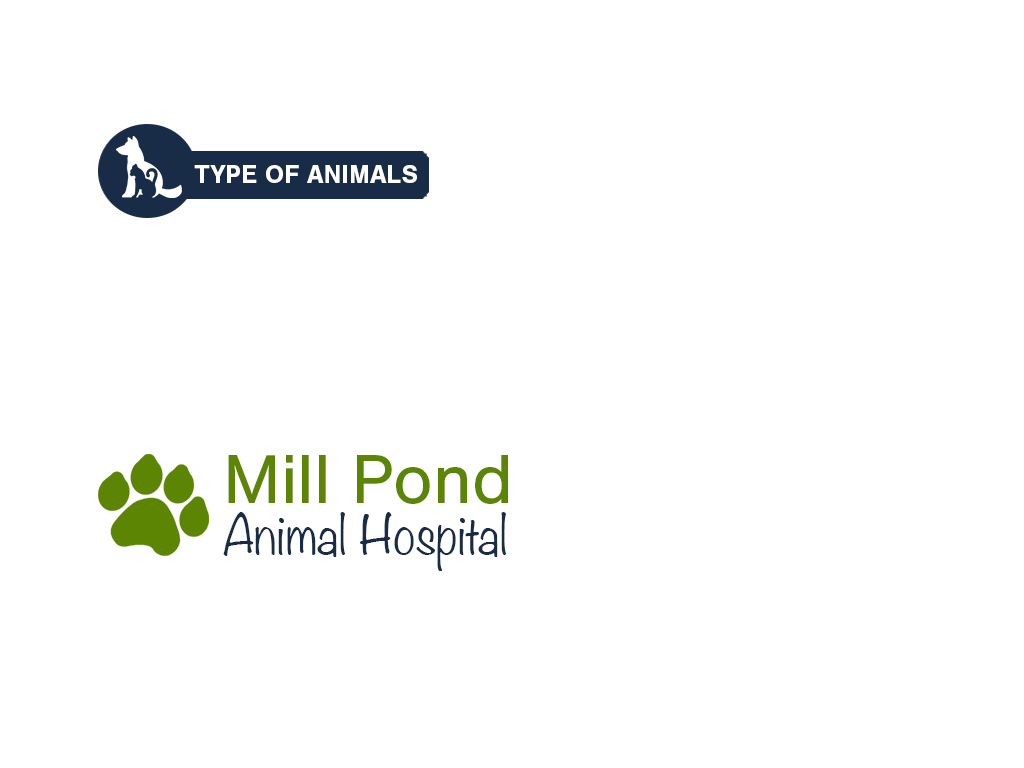
<style>
.page{position:relative;width:1024px;height:768px;background:#ffffff}
.page>*{position:absolute;margin:0}
.t1{font:26px "NimbusSan-Bol";color:#ffffff;text-transform:uppercase}
.t2{font:48.6px/51.4px "Noteworthy-Light";color:#182c47}
.t3{font:72.4px/51.4px "NimbusSan-Reg";color:#5b8503}
</style>
<div class="page">
<p class="t1" style="left:194px;top:165px;width:223px;height:18px">Type of animals</p>
<p class="t2" style="left:223px;top:455px;width:285px;height:116px"><span class="t3">Mill Pond <br></span>Animal Hospital</p>
</div>
